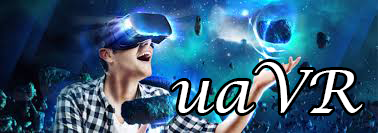
<style>
.page{position:relative;width:378px;height:133px}
.page>*{position:absolute;margin:0}
.t1{font:60px "LucidaCalligraphy-Italic";color:#ffffff}
</style>
<div class="page">
<p class="t1" style="left:172px;top:62px;width:191px;height:51px">uaVR</p>
</div>
